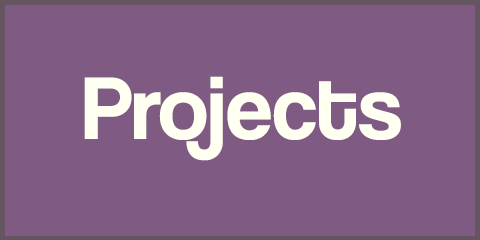
<style>
.page{position:relative;width:480px;height:240px;background:#7f5b83}
.page>*{position:absolute;margin:0}
.t1{font:92px "CoolveticaRg-Regular";color:#fffff2}
</style>
<div class="page">
<p class="t1" style="left:84px;top:76px;width:317px;height:85px">Projects</p>
</div>
